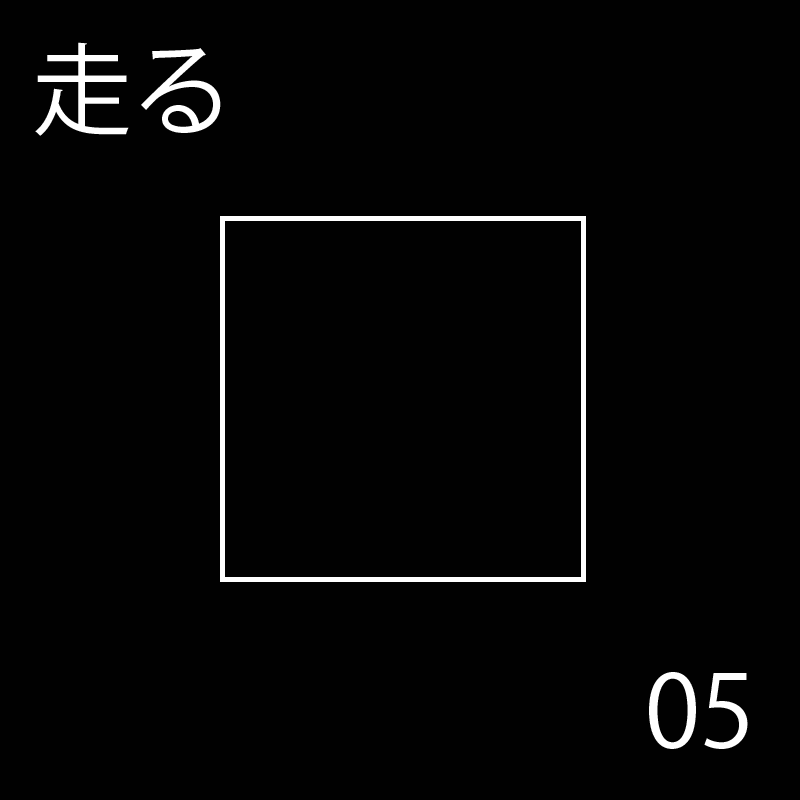
<style>
.page{position:relative;width:800px;height:800px;background:#010101}
.page>*{position:absolute;margin:0}
.t1{font:100px "KozGoPr6N-Regular";color:#ffffff}
</style>
<div class="page">
<p class="t1" style="left:35px;top:42px;width:186px;height:94px">走る</p>
<p class="t1" style="left:35px;top:42px;width:186px;height:94px">走る</p>
<p class="t1" style="left:35px;top:42px;width:186px;height:94px">走る</p>
<p class="t1" style="left:35px;top:42px;width:186px;height:94px">走る</p>
<p class="t1" style="left:35px;top:42px;width:186px;height:94px">走る</p>
<p class="t1" style="left:35px;top:42px;width:186px;height:94px">走る</p>
<p class="t1" style="left:649px;top:672px;width:102px;height:77px">00</p>
<p class="t1" style="left:649px;top:672px;width:85px;height:77px">01</p>
<p class="t1" style="left:649px;top:672px;width:101px;height:77px">02</p>
<p class="t1" style="left:649px;top:672px;width:99px;height:77px">03</p>
<p class="t1" style="left:649px;top:672px;width:105px;height:77px">04</p>
<p class="t1" style="left:649px;top:672px;width:99px;height:77px">05</p>
</div>
